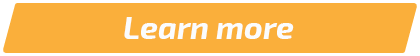
<style>
.page{position:relative;width:420px;height:56px;background:#faaf3b}
.page>*{position:absolute;margin:0}
.t1{font:32px "Exo2-BoldItalic";color:#fafcfd}
</style>
<div class="page">
<p class="t1" style="left:124px;top:17px;width:170px;height:22px">Learn more</p>
</div>
